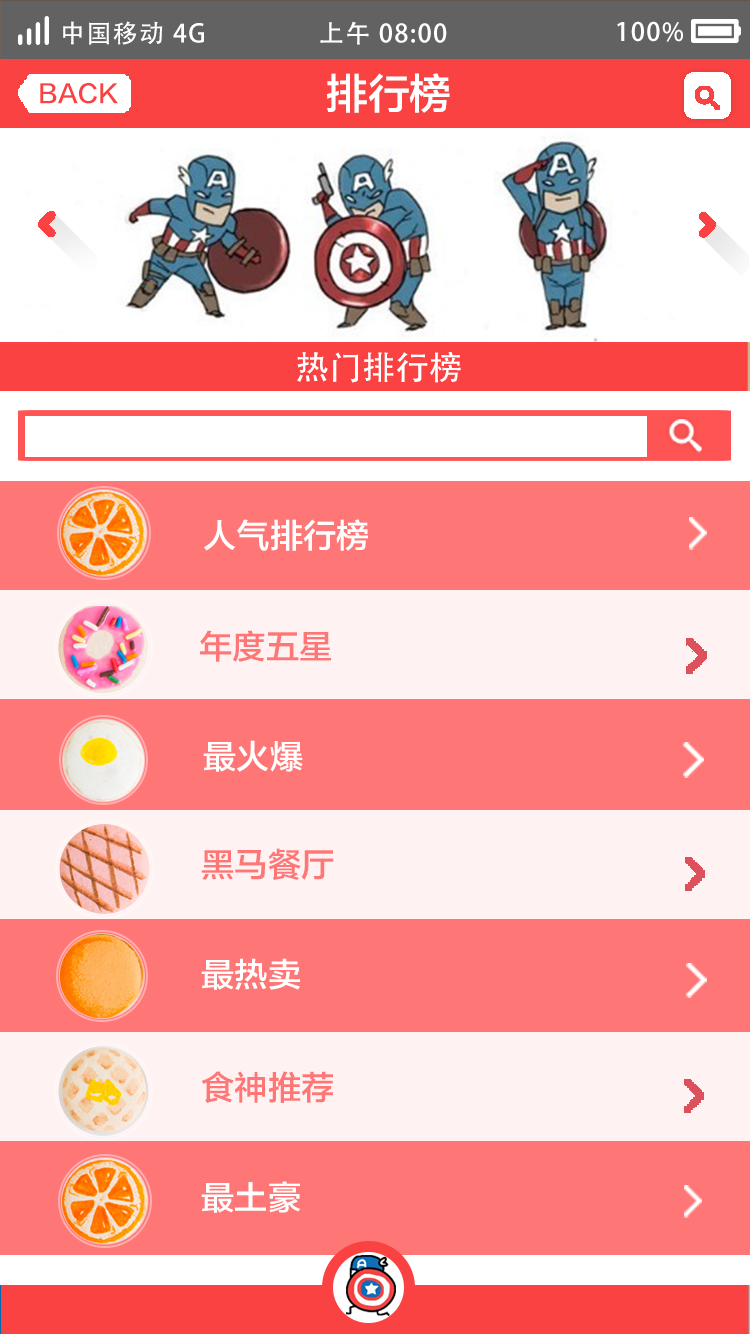
<style>
.page{position:relative;width:750px;height:1334px;background:#ff7676}
.page>*{position:absolute;margin:0}
.t1{font:25px "AdobeHeitiStd-Regular";letter-spacing:0.06em;color:#ffffff}
.t2{font:41.7px "FZLTZHK--GBK1-0";color:#ffffff;text-transform:uppercase}
.t3{font:25px "FZLTZHK--GBK1-0";color:#fa4242;text-transform:uppercase}
.t4{font:33.3px "AdobeHeitiStd-Regular";color:#ffffff}
.t5{font:33.3px "FZLTZHK--GBK1-0";color:#ffffff}
.t6{font:33.3px "FZLTZHK--GBK1-0";color:#ff7676}
</style>
<div class="page">
<p class="t1" style="left:63px;top:21px;width:141px;height:24px">中国移动 4G</p>
<p class="t1" style="left:320px;top:21px;width:127px;height:24px">上午 08:00</p>
<p class="t1" style="left:617px;top:21px;width:66px;height:21px">100%</p>
<p class="t2" style="left:327px;top:73px;width:123px;height:40px">排行榜</p>
<p class="t3" style="left:40px;top:82px;width:78px;height:22px">back</p>
<p class="t4" style="left:297px;top:351px;width:164px;height:32px">热门排行榜</p>
<p class="t5" style="left:204px;top:519px;width:164px;height:32px">人气排行榜</p>
<p class="t6" style="left:200px;top:630px;width:131px;height:32px">年度五星</p>
<p class="t5" style="left:203px;top:740px;width:100px;height:32px">最火爆</p>
<p class="t6" style="left:201px;top:848px;width:133px;height:32px">黑马餐厅</p>
<p class="t5" style="left:201px;top:958px;width:99px;height:32px">最热卖</p>
<p class="t6" style="left:201px;top:1071px;width:132px;height:32px">食神推荐</p>
<p class="t5" style="left:201px;top:1181px;width:100px;height:32px">最土豪</p>
</div>
